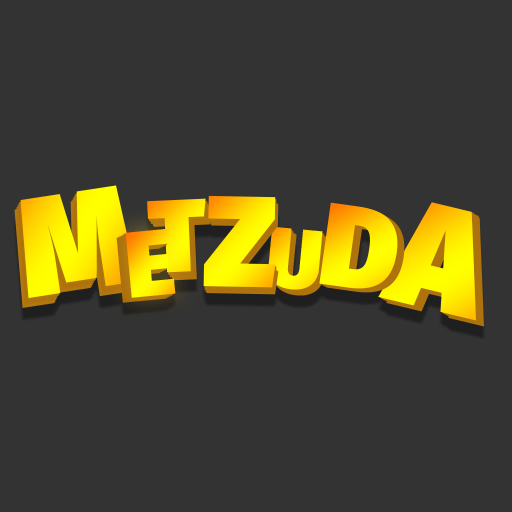
<style>
.page{position:relative;width:512px;height:512px;background:#333333}
.page>*{position:absolute;margin:0}
.t1{font:140.3px "FiraSans-Ultra";color:#fff200}
.t2{font:102.9px "FiraSans-Ultra"}
.t3{font:129.2px "FiraSans-Ultra";color:#fff000}
.t4{font:116.9px "FiraSans-Ultra"}
.t5{font:149.7px "FiraSans-Ultra";color:#ffed00}
.t6{font:93.5px "FiraSans-Ultra"}
.t7{font:84.2px "FiraSans-Ultra";color:#ffee00}
</style>
<div class="page">
<p class="t1" style="left:20px;top:185px;width:118px;height:113px;rotate:-9deg">M</p>
<p class="t2" style="left:147px;top:198px;width:59px;height:75px;rotate:-3deg">T</p>
<p class="t3" style="left:203px;top:195px;width:73px;height:93px;rotate:1deg">Z</p>
<p class="t4" style="left:319px;top:202px;width:79px;height:87px;rotate:8deg">D</p>
<p class="t5" style="left:378px;top:202px;width:98px;height:119px;rotate:14deg">A</p>
<p class="t6" style="left:125px;top:228px;width:51px;height:70px;rotate:-5deg">E</p>
<p class="t7" style="left:268px;top:226px;width:55px;height:64px;rotate:5deg">U</p>
</div>
